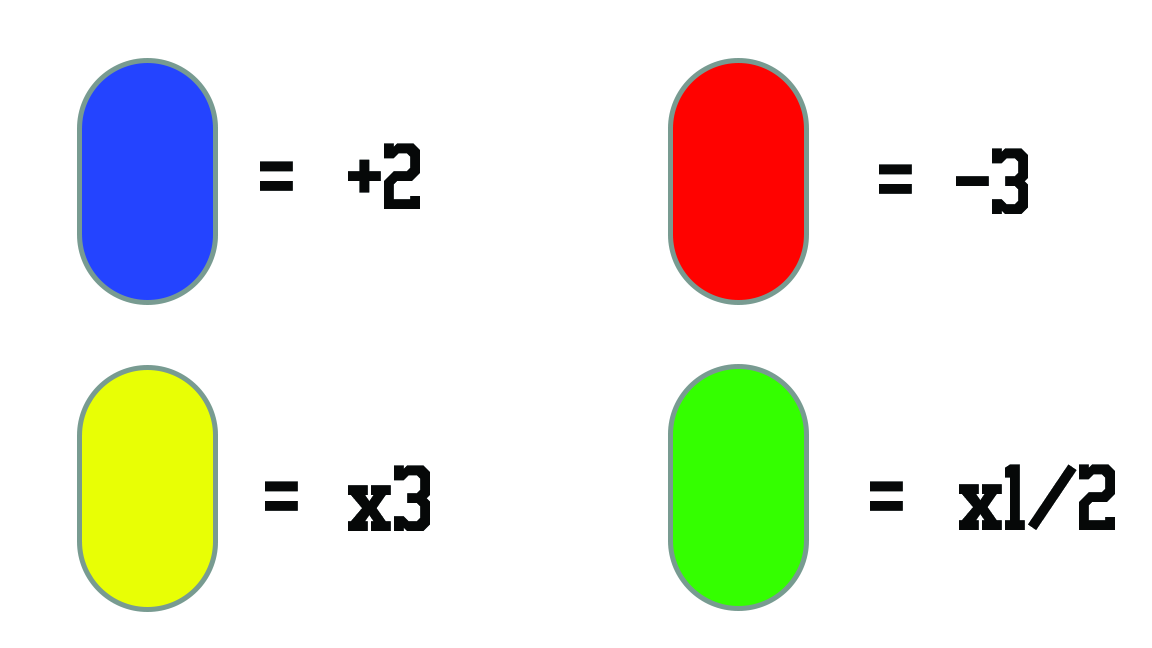
<style>
.page{position:relative;width:1152px;height:648px;background:#ffffff}
.page>*{position:absolute;margin:0}
.t1{font:86.1px "Staubach";color:#060808}
</style>
<div class="page">
<p class="t1" style="left:348px;top:143px;width:72px;height:66px">+2</p>
<p class="t1" style="left:956px;top:148px;width:72px;height:66px">-3</p>
<p class="t1" style="left:260px;top:161px;width:33px;height:30px">=</p>
<p class="t1" style="left:879px;top:164px;width:33px;height:30px">=</p>
<p class="t1" style="left:348px;top:465px;width:82px;height:66px">x3</p>
<p class="t1" style="left:959px;top:464px;width:156px;height:66px">x1/2</p>
<p class="t1" style="left:265px;top:481px;width:33px;height:30px">=</p>
<p class="t1" style="left:870px;top:481px;width:33px;height:30px">=</p>
</div>
